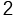
<style>
.page{position:relative;width:16px;height:16px;background:#ffffff}
.page>*{position:absolute;margin:0}
.t1{font:20px "DengXian";color:#000000}
</style>
<div class="page">
<p class="t1" style="left:3px;top:1px;width:10px;height:14px">2</p>
</div>
